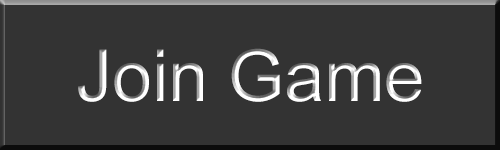
<style>
.page{position:relative;width:500px;height:150px;background:#333333}
.page>*{position:absolute;margin:0}
.t1{font:72px "ArialMT";color:#ffffff}
</style>
<div class="page">
<p class="t1" style="left:78px;top:48px;width:344px;height:54px">Join Game</p>
</div>
